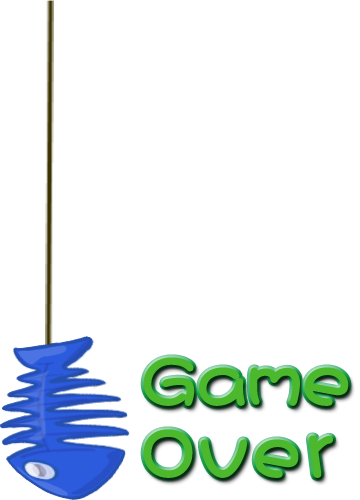
<style>
.page{position:relative;width:360px;height:500px;background:#ffffff}
.page>*{position:absolute;margin:0}
.t1{font:70px/72px "DFPShaoNvW5";color:#4cb82b;font-weight:bold}
.t2{font:70px/72px "DFPShaoNvW5";letter-spacing:0.075em;color:#4cb82b;font-weight:bold}
</style>
<div class="page">
<p class="t1" style="left:143px;top:357px;width:206px;height:121px">Game <br><span class="t2">Over</span></p>
</div>
